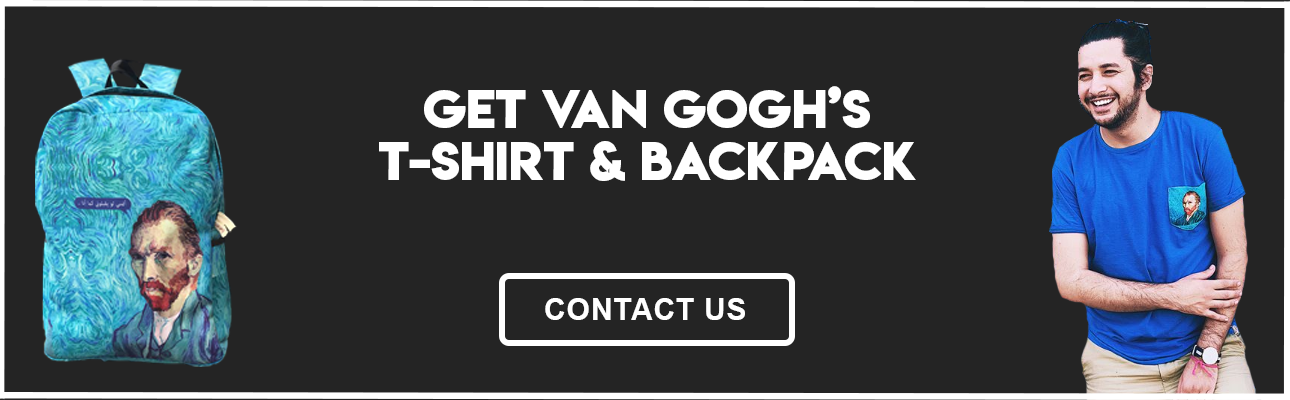
<style>
.page{position:relative;width:1290px;height:400px;background:#242424}
.page>*{position:absolute;margin:0}
.t1{font:48px "LemonMilkbold";color:#ffffff;text-transform:uppercase}
.t2{font:30px "Arial-BoldMT";color:#ffffff;text-transform:uppercase}
</style>
<div class="page">
<p class="t1" style="left:424px;top:86px;width:446px;height:42px">get van gogh’s</p>
<p class="t1" style="left:379px;top:141px;width:537px;height:40px">T-shirt &amp; backpack</p>
<p class="t2" style="left:545px;top:298px;width:200px;height:22px">contact us</p>
</div>
